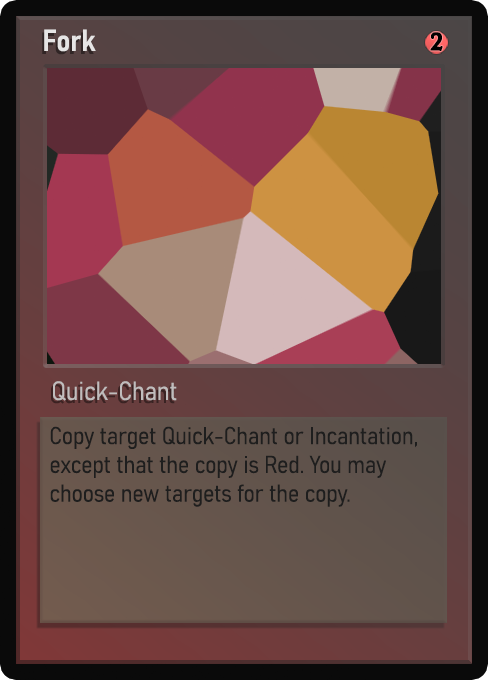
<style>
.page{position:relative;width:488px;height:680px}
.page>*{position:absolute;margin:0}
.t1{font:30px "Bahnschrift-SemiBoldSemiCondensed";color:#f2f2f2;font-weight:bold}
.t2{font:25px "WTRRoycroft";color:#000000;font-weight:bold;scale:1.09 1}
.t3{font:26px "Bahnschrift-LightSemiCondensed";color:#c8c8c8;font-weight:bold}
.t4{font:24px "Bahnschrift-LightSemiCondensed";color:#1e1e1e;font-weight:bold}
</style>
<div class="page">
<p class="t1" style="left:44px;top:29px;width:52px;height:23px;opacity:0.9">Fork</p>
<p class="t2" style="left:430px;top:32px;width:13px;height:19px">2</p>
<p class="t3" style="left:53px;top:381px;width:124px;height:20px;opacity:0.9">Quick-Chant</p>
<p class="t4" style="left:50px;top:426px;width:367px;height:81px">Copy target Quick-Chant or Incantation, except that the copy is Red. You may choose new targets for the copy.</p>
</div>
